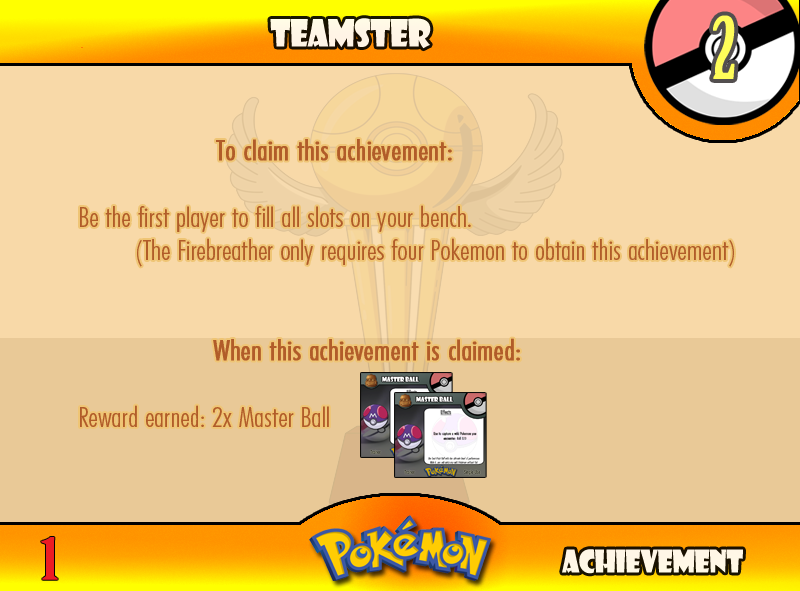
<style>
.page{position:relative;width:800px;height:591px;background:#f8d9a8}
.page>*{position:absolute;margin:0}
.t1{font:83.3px "BirchStd";letter-spacing:0.025em;color:#fffd59;font-weight:bold}
.t2{font:36.7px "ShowcardGothic-Reg";letter-spacing:-0.025em;color:#fff6e6;scale:0.91 1}
.t3{font:27.8px "FuturaCondensedBQ-Light";color:#b15c29;scale:1.08 1}
.t4{font:33.3px "FuturaCondensedBQ-Light";color:#b15c29;font-weight:bold;scale:1.08 1}
.t5{font:27.8px "FuturaCondensedBQ-Light";color:#b15c29;font-weight:bold;scale:1.08 1}
.t6{font:55.6px "BirchStd";color:#ed1c24;font-weight:bold;scale:1.5 1}
.t7{font:30.6px "ShowcardGothic-Reg";letter-spacing:-0.025em;color:#fff7e6;scale:0.91 1}
</style>
<div class="page">
<p class="t1" style="left:713px;top:15px;width:22px;height:64px">2</p>
<p class="t2" style="left:270px;top:18px;width:161px;height:31px">Teamster</p>
<p class="t3" style="left:80px;top:139px;width:654px;height:288px"><span class="t4">          <br>      </span><span class="t5">To claim this achievement:<br><br></span> Be the first player to fill all slots on your bench.<br>  (The Firebreather only requires four Pokemon to obtain this achievement)<br><br><br>      <span class="t5">When this achievement is claimed:<br></span><br> Reward earned: 2x Master Ball</p>
<p class="t6" style="left:41px;top:537px;width:17px;height:43px">1</p>
<p class="t7" style="left:562px;top:549px;width:181px;height:25px">Achievement</p>
</div>
